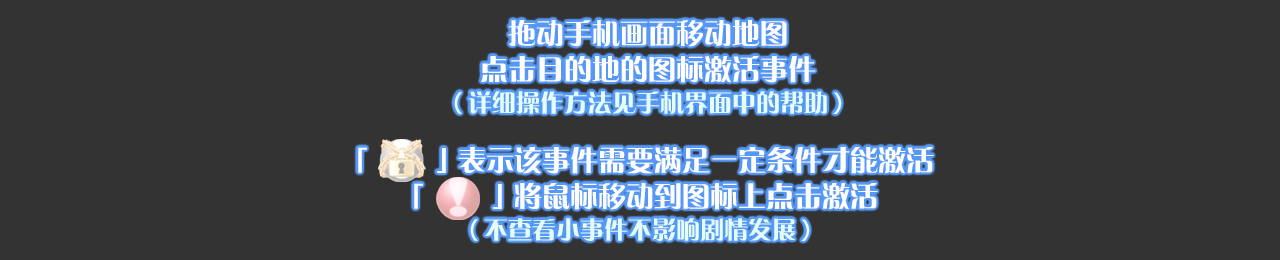
<style>
.page{position:relative;width:1280px;height:260px;background:#333333}
.page>*{position:absolute;margin:0}
.t1{font:28px/36px "FZCQK--GBK1-0";color:#ffffff}
.t2{font:24px/36px "FZCQK--GBK1-0";color:#e4fff8}
</style>
<div class="page">
<p class="t1" style="left:454px;top:20px;width:388px;height:94px;text-align:center">拖动手机画面移动地图<br>点击目的地的图标激活事件<br><span class="t2">（详细操作方法见手机界面中的帮助）</span></p>
<p class="t1" style="left:358px;top:147px;width:576px;height:94px;text-align:center">「　　」表示该事件需要满足一定条件才能激活<br>「　　」将鼠标移动到图标上点击激活<br><span class="t2">（不查看小事件不影响剧情发展）</span></p>
</div>
